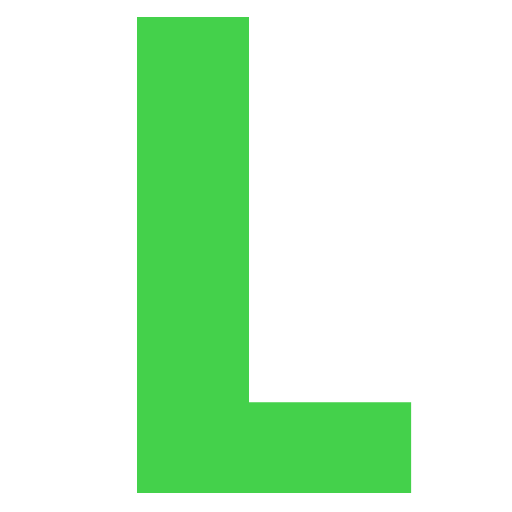
<style>
.page{position:relative;width:512px;height:512px;background:#ffffff}
.page>*{position:absolute;margin:0}
.t1{font:667.1px "HelveticaNeueLTStd-HvCn";color:#44d14b}
</style>
<div class="page">
<p class="t1" style="left:137px;top:17px;width:275px;height:476px">L</p>
</div>
